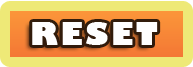
<style>
.page{position:relative;width:193px;height:67px;background:#eee977}
.page>*{position:absolute;margin:0}
.t1{font:30.5px "GillSans-UltraBold";letter-spacing:0.1em;color:#ffffff}
</style>
<div class="page">
<p class="t1" style="left:32px;top:22px;width:126px;height:23px">RESET</p>
</div>
